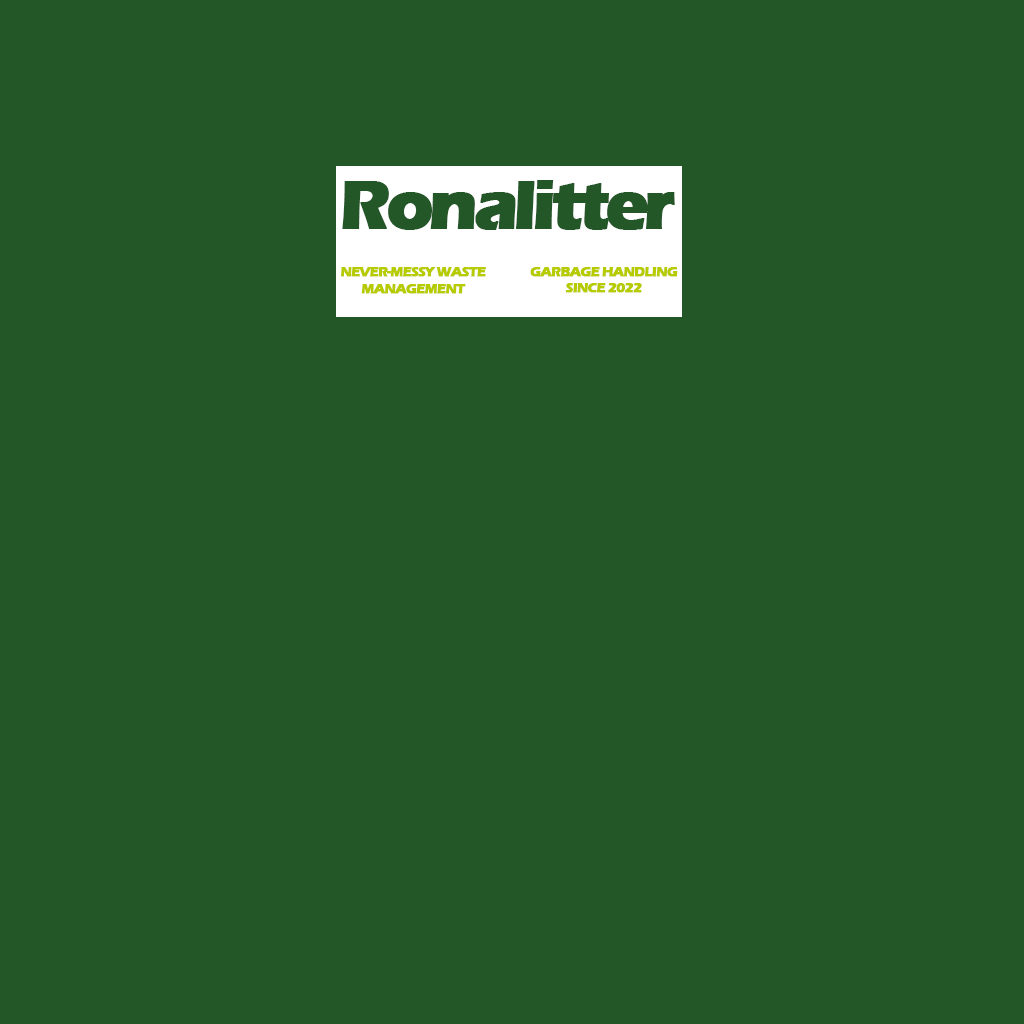
<style>
.page{position:relative;width:1024px;height:1024px;background:#235727}
.page>*{position:absolute;margin:0}
.t1{font:71.4px "ErasITC-Bold";letter-spacing:-0.075em;color:#235727;font-weight:bold}
.t2{font:14px "ErasITC-Bold";letter-spacing:-0.075em;color:#b6cb00;text-transform:uppercase;font-weight:bold}
.t3{font:16px "ErasITC-Bold";letter-spacing:-0.075em;color:#b6cb00;text-transform:uppercase;font-weight:bold}
</style>
<div class="page">
<p class="t1" style="left:342px;top:180px;width:333px;height:50px">Ronalitter</p>
<p class="t2" style="left:341px;top:267px;width:145px;height:27px;text-align:center">Never-messy waste<br>management</p>
<p class="t2" style="left:530px;top:267px;width:148px;height:26px;text-align:center"><span class="t3"><br></span>garbage handling<br>since 2022</p>
</div>
